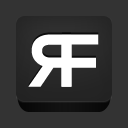
<style>
.page{position:relative;width:128px;height:128px;background:#333333}
.page>*{position:absolute;margin:0}
.t1{font:77.2px "AWConquerorCarved-One";color:#ffffff}
</style>
<div class="page">
<p class="t1" style="left:28px;top:34px;width:43px;height:53px;rotate:180deg">R</p>
<p class="t1" style="left:62px;top:34px;width:37px;height:53px">F</p>
</div>
